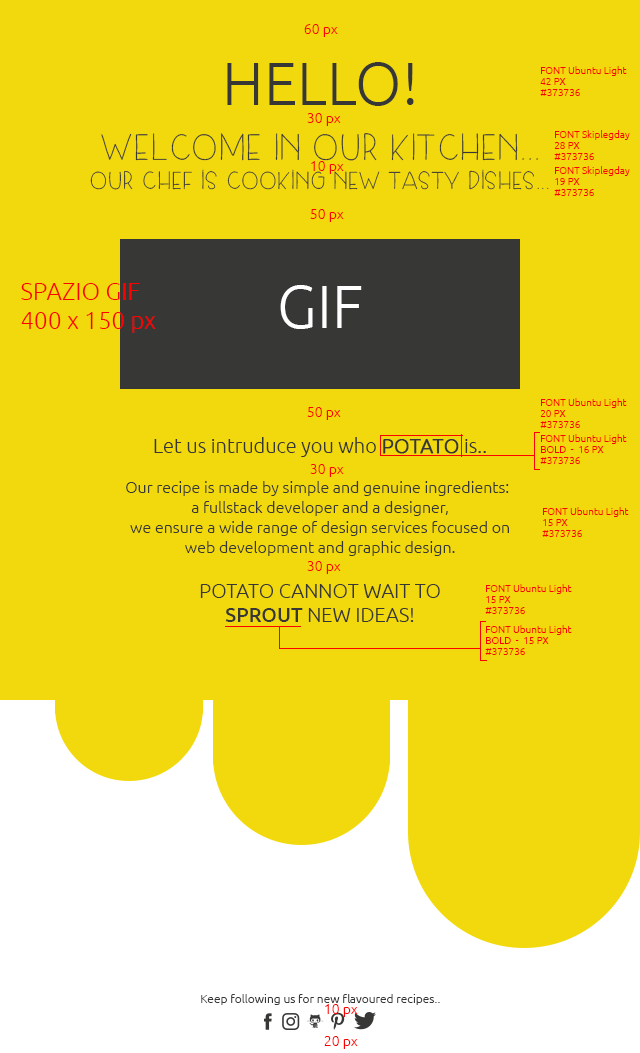
<style>
.page{position:relative;width:640px;height:1053px;background:#f1d90d}
.page>*{position:absolute;margin:0}
.t1{font:14px "Ubuntu-Light";color:#ff0000}
.t2{font:60px "Ubuntu-Light";color:#373736}
.t3{font:10px/11px "Ubuntu-Light";color:#ff0000}
.t4{font:36px "SkipLegDay";color:#373736}
.t5{font:24px "SkipLegDay"}
.t6{font:24px "Ubuntu-Light";color:#ff0000}
.t7{font:60px "Ubuntu-Light";color:#ffffff}
.t8{font:16px/20px "Ubuntu-Light";color:#373736}
.t9{font:20px/20px "Ubuntu-Light";color:#373736}
.t10{font:20px/20px "Ubuntu-Light";color:#373736;text-transform:uppercase;font-weight:bold}
.t11{font:20px/24px "Ubuntu-Light";color:#373736;text-transform:uppercase}
.t12{font:20px/24px "Ubuntu-Medium";color:#373736;text-transform:uppercase}
.t13{font:12px "Ubuntu-Light";color:#373736}
</style>
<div class="page">
<p class="t1" style="left:304px;top:24px;width:34px;height:13px">60 px</p>
<p class="t2" style="left:227px;top:62px;width:187px;height:44px">HELLO!</p>
<p class="t3" style="left:540px;top:66px;width:87px;height:30px">FONT Ubuntu Light <br>42 PX<br>#373736</p>
<p class="t1" style="left:307px;top:113px;width:34px;height:13px">30 px</p>
<p class="t4" style="left:101px;top:133px;width:438px;height:28px">WELCOME IN OUR KITCHEN...</p>
<p class="t3" style="left:554px;top:130px;width:76px;height:30px">FONT Skiplegday<br>28 PX<br>#373736</p>
<p class="t1" style="left:311px;top:161px;width:33px;height:13px">10 px</p>
<p class="t5" style="left:90px;top:169px;width:459px;height:21px">our chef is cooking new tasty dishes...</p>
<p class="t3" style="left:554px;top:166px;width:76px;height:30px">FONT Skiplegday<br>19 PX<br>#373736</p>
<p class="t1" style="left:310px;top:209px;width:34px;height:13px">50 px</p>
<p class="t6" style="left:21px;top:283px;width:135px;height:50px">SPAZIO GIF <br>400 x 150 px</p>
<p class="t7" style="left:280px;top:285px;width:82px;height:44px">GIF</p>
<p class="t3" style="left:540px;top:398px;width:87px;height:30px">FONT Ubuntu Light<br>20 PX<br>#373736</p>
<p class="t1" style="left:307px;top:407px;width:34px;height:13px">50 px</p>
<p class="t8" style="left:126px;top:437px;width:383px;height:119px;text-align:center"><span class="t9">Let us intruduce you who </span><span class="t10">Potato</span><span class="t9"> is..<br></span><br>Our recipe is made by simple and genuine ingredients: a fullstack developer and a designer, <br>we ensure a wide range of design services focused on <br>web development and graphic design.</p>
<p class="t3" style="left:540px;top:434px;width:87px;height:30px">FONT Ubuntu Light <br>BOLD  -  16 PX<br>#373736</p>
<p class="t1" style="left:310px;top:464px;width:34px;height:13px">30 px</p>
<p class="t3" style="left:542px;top:507px;width:87px;height:30px">FONT Ubuntu Light<br>15 PX<br>#373736</p>
<p class="t1" style="left:307px;top:561px;width:34px;height:13px">30 px</p>
<p class="t11" style="left:200px;top:584px;width:240px;height:38px;text-align:center">Potato cannot wait to <br><span class="t12">sprout </span>new ideas!</p>
<p class="t3" style="left:485px;top:584px;width:87px;height:30px">FONT Ubuntu Light<br>15 PX<br>#373736</p>
<p class="t3" style="left:485px;top:625px;width:87px;height:30px">FONT Ubuntu Light<br>BOLD  -  15 PX<br>#373736</p>
<p class="t13" style="left:201px;top:994px;width:239px;height:11px">Keep following us for new flavoured recipes..</p>
<p class="t1" style="left:325px;top:1004px;width:33px;height:13px">10 px</p>
<p class="t1" style="left:324px;top:1036px;width:34px;height:13px">20 px</p>
</div>
